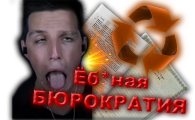
<style>
.page{position:relative;width:195px;height:120px}
.page>*{position:absolute;margin:0}
.t1{font:19.3px "Arial-Black"}
</style>
<div class="page">
<p class="t1" style="left:33px;top:67px;width:154px;height:47px;text-align:center;rotate:4deg">Ёб*ная<br>БЮРОКРАТИЯ</p>
</div>
